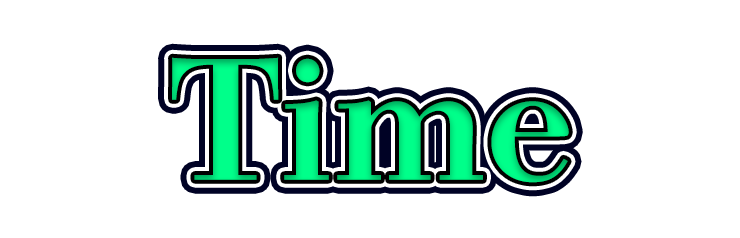
<style>
.page{position:relative;width:740px;height:238px;background:#ffffff}
.page>*{position:absolute;margin:0}
.t1{font:166.7px "DNPShuei4goBStd-Hv";color:#00ff8a}
</style>
<div class="page">
<p class="t1" style="left:172px;top:57px;width:397px;height:126px">Time</p>
</div>
